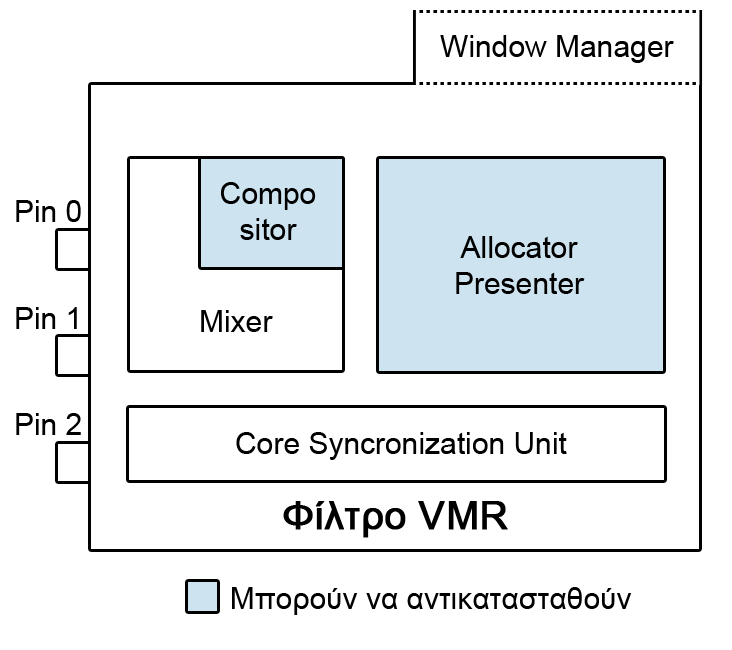
<style>
.page{position:relative;width:732px;height:650px;background:#ffffff}
.page>*{position:absolute;margin:0}
.t1{font:30px "ArialMT";color:#000000}
.t2{font:39px "ArialMT";color:#000000;font-weight:bold}
</style>
<div class="page">
<p class="t1" style="left:440px;top:35px;width:234px;height:28px">Window Manager</p>
<p class="t1" style="left:221px;top:182px;width:95px;height:58px;text-align:center">Compo<br>sitor</p>
<p class="t1" style="left:16px;top:200px;width:65px;height:22px">Pin 0</p>
<p class="t1" style="left:456px;top:236px;width:129px;height:58px;text-align:center">Allocator<br>Presenter</p>
<p class="t1" style="left:16px;top:307px;width:61px;height:22px">Pin 1</p>
<p class="t1" style="left:201px;top:310px;width:72px;height:22px">Mixer</p>
<p class="t1" style="left:16px;top:413px;width:65px;height:22px">Pin 2</p>
<p class="t1" style="left:236px;top:432px;width:331px;height:28px">Core Syncronization Unit</p>
<p class="t2" style="left:283px;top:501px;width:225px;height:37px">Φίλτρο VMR</p>
<p class="t1" style="left:232px;top:587px;width:400px;height:28px">Μπορούν να αντικατασταθούν</p>
</div>
